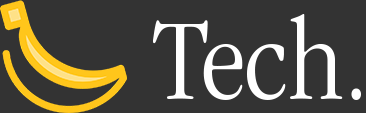
<style>
.page{position:relative;width:366px;height:113px;background:#333333}
.page>*{position:absolute;margin:0}
.t1{font:120px "ITCGaramondStd-LtNarrow";color:#ffffff}
</style>
<div class="page">
<p class="t1" style="left:152px;top:14px;width:209px;height:86px">Tech.</p>
</div>
